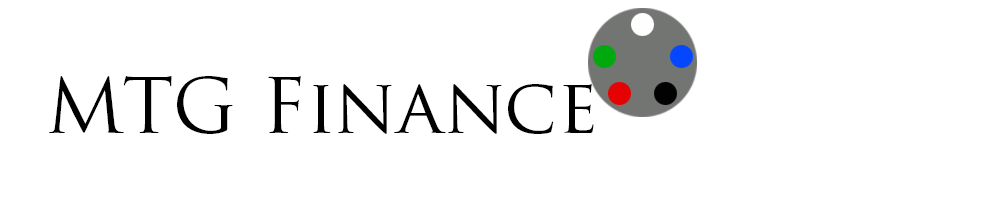
<style>
.page{position:relative;width:1000px;height:200px;background:#ffffff}
.page>*{position:absolute;margin:0}
.t1{font:75px "TrajanPro-Regular";color:#000000}
</style>
<div class="page">
<p class="t1" style="left:49px;top:76px;width:545px;height:58px">MTG Finance</p>
</div>
